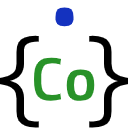
<style>
.page{position:relative;width:128px;height:128px;background:#ffffff}
.page>*{position:absolute;margin:0}
.t1{font:100px "CamingoCode-Regular";color:#1432bf}
.t2{font:100px "CamingoCode-Regular";color:#000000}
.t3{font:60px "CamingoCode-Bold";color:#289228}
</style>
<div class="page">
<p class="t1" style="left:55px;top:7px;width:19px;height:20px">•</p>
<p class="t2" style="left:0px;top:35px;width:39px;height:93px">{</p>
<p class="t2" style="left:89px;top:35px;width:39px;height:93px">}</p>
<p class="t3" style="left:33px;top:57px;width:62px;height:44px">Co</p>
</div>
